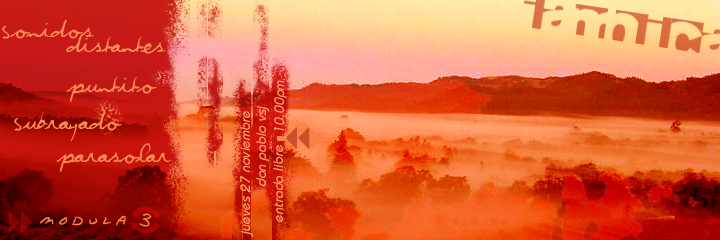
<style>
.page{position:relative;width:720px;height:240px}
.page>*{position:absolute;margin:0}
.t1{font:30px "Violation";color:#fb8950}
.t2{font:14px "BiminiItalic";color:#ff9e65}
.t3{font:36px "DadsRecipe";color:#f88440}
</style>
<div class="page">
<p class="t1" style="left:2px;top:19px;width:93px;height:20px">Sonidos</p>
<p class="t1" style="left:66px;top:34px;width:100px;height:20px">distantes</p>
<p class="t1" style="left:66px;top:76px;width:91px;height:26px">puntito</p>
<p class="t2" style="left:274px;top:80px;width:13px;height:51px;rotate:-90deg">10.00pm</p>
<p class="t1" style="left:14px;top:111px;width:108px;height:31px">Subrayado</p>
<p class="t2" style="left:240px;top:111px;width:13px;height:126px;rotate:-90deg">jueves 27 noviembre</p>
<p class="t2" style="left:256px;top:106px;width:13px;height:80px;rotate:-90deg">don pablo vsj</p>
<p class="t1" style="left:56px;top:143px;width:116px;height:29px">parasolar</p>
<p class="t2" style="left:273px;top:145px;width:10px;height:77px;rotate:-90deg">entrada libre</p>
<p class="t3" style="left:39px;top:213px;width:113px;height:14px">modula 3</p>
</div>
